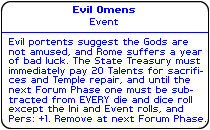
<style>
.page{position:relative;width:210px;height:130px;background:#ffffff}
.page>*{position:absolute;margin:0}
.t1{font:8px "PFTempestaSeven-Bold";color:#0000ff}
.t2{font:8px "PFTempestaSeven";color:#0000ff}
</style>
<div class="page">
<p class="t1" style="left:73px;top:6px;width:62px;height:7px">Evil Omens</p>
<p class="t2" style="left:90px;top:18px;width:28px;height:7px">Event</p>
<p class="t2" style="left:9px;top:38px;width:197px;height:84px">Evil portents suggest the Gods are<br>not amused, and Rome suffers a year<br>of bad luck. The State Treasury must<br>immediately pay 20 Talents for sacrifi-<br>ces and Temple repair, and until the<br>next Forum Phase one must be sub-<br>tracted from EVERY die and dice roll<br>except the Ini and Event rolls, and<br>Pers: +1. Remove at next Forum Phase.</p>
</div>
